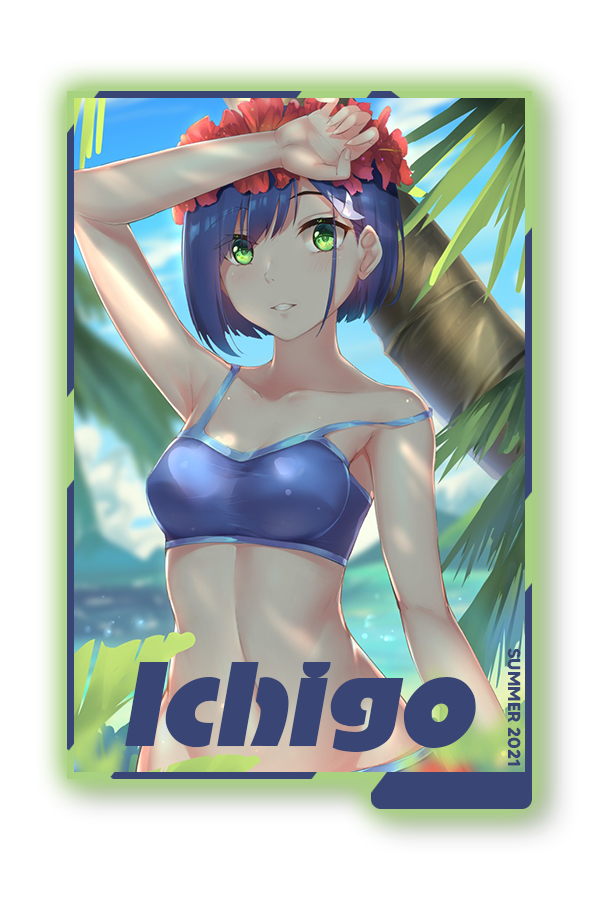
<style>
.page{position:relative;width:600px;height:900px;background:#ffffff}
.page>*{position:absolute;margin:0}
.t1{font:17.4px "MADETOMMY-Bold";color:#394575}
.t2{font:116.4px "AdvertisersGothicItalic";color:#394575}
</style>
<div class="page">
<p class="t1" style="left:507px;top:648px;width:14px;height:118px;rotate:90deg">SUMMER 2021</p>
<p class="t2" style="left:125px;top:662px;width:351px;height:90px">Ichigo</p>
</div>
